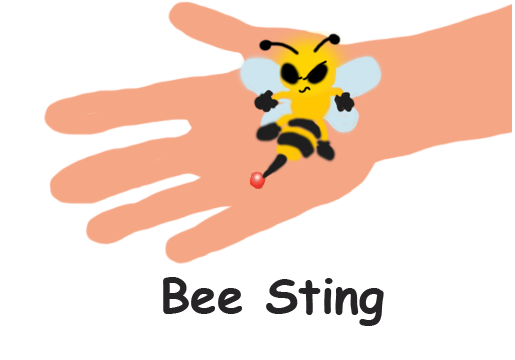
<style>
.page{position:relative;width:515px;height:360px;background:#ffffff}
.page>*{position:absolute;margin:0}
.t1{font:48px "ComicSansMS-Bold";color:#262426}
</style>
<div class="page">
<p class="t1" style="left:163px;top:277px;width:221px;height:49px">Bee Sting</p>
</div>
